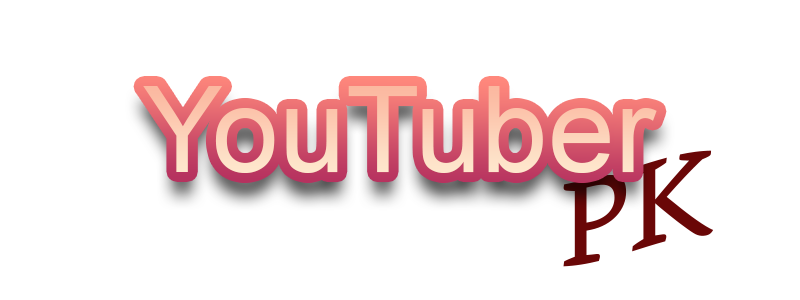
<style>
.page{position:relative;width:800px;height:300px;background:#ffffff}
.page>*{position:absolute;margin:0}
.t1{font:120px "ArialMT";color:#fdd2b9}
.t2{font:120px "Bookerly-Regular";color:#6a0707}
</style>
<div class="page">
<p class="t1" style="left:143px;top:86px;width:514px;height:87px">YouTuber</p>
<p class="t2" style="left:563px;top:150px;width:151px;height:117px">PK</p>
</div>
